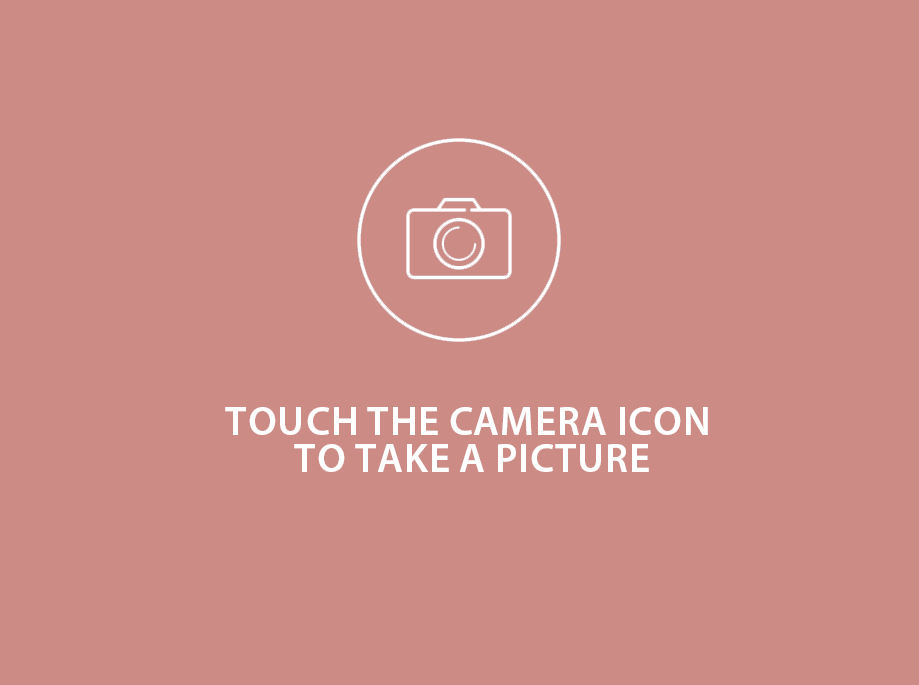
<style>
.page{position:relative;width:919px;height:685px;background:#cd8b86}
.page>*{position:absolute;margin:0}
.t1{font:41px/37px "MyriadPro-Semibold";color:#ffffff;text-transform:uppercase}
</style>
<div class="page">
<p class="t1" style="left:225px;top:407px;width:483px;height:65px;text-align:center">TOUCH THE CAMERA ICON<br> TO TAKE A PICTURE</p>
</div>
